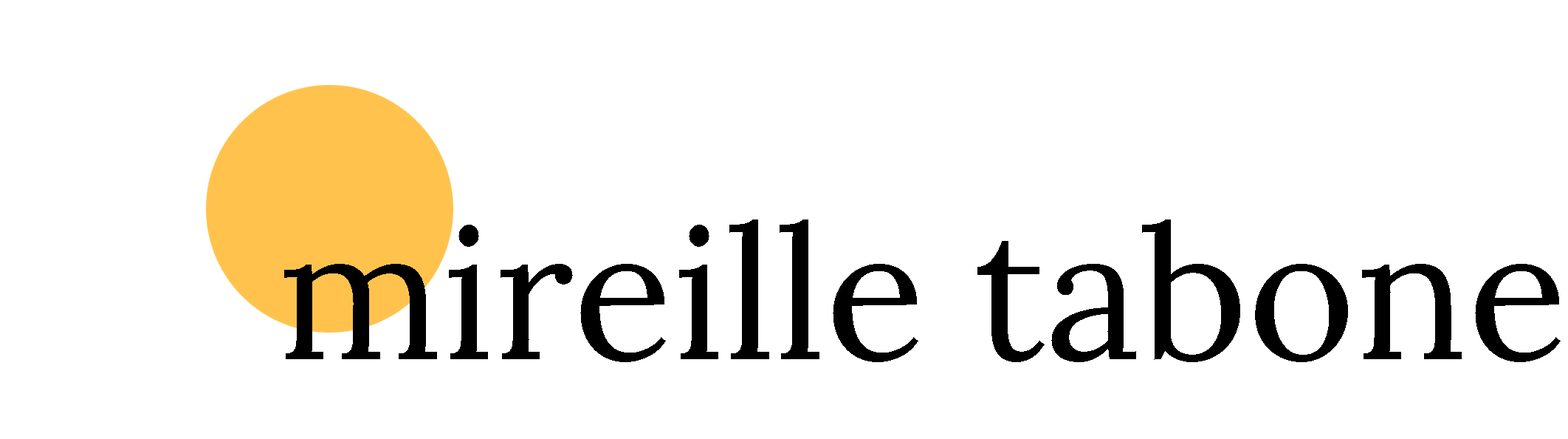
<style>
.page{position:relative;width:1568px;height:439px;background:#ffffff}
.page>*{position:absolute;margin:0}
.t1{font:184.6px "Lora-Regular";color:#000000}
</style>
<div class="page">
<p class="t1" style="left:284px;top:219px;width:1277px;height:143px">mireille tabone</p>
</div>
